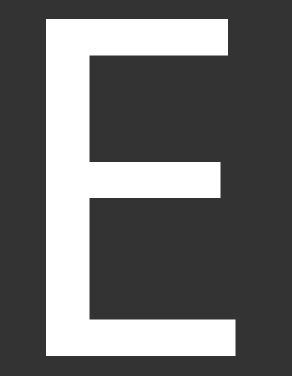
<style>
.page{position:relative;width:292px;height:376px;background:#333333}
.page>*{position:absolute;margin:0}
.t1{font:500px "MyriadPro-Regular";color:#ffffff}
</style>
<div class="page">
<p class="t1" style="left:46px;top:19px;width:190px;height:337px">E</p>
</div>
